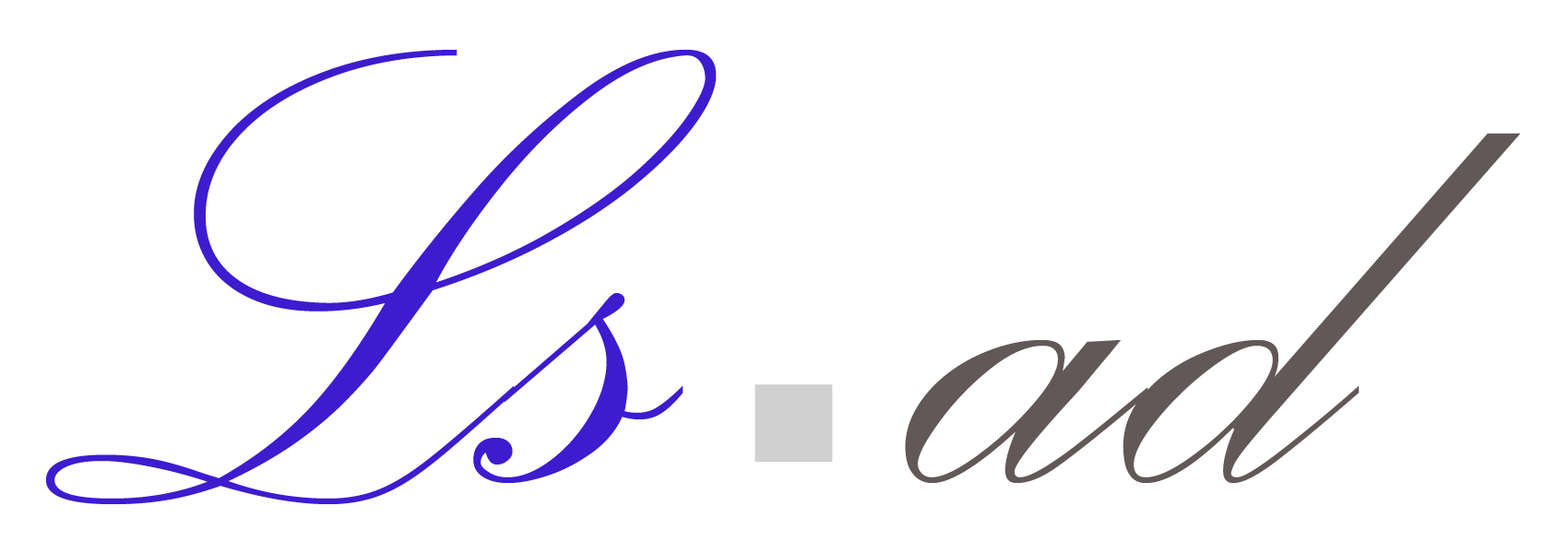
<style>
.page{position:relative;width:1568px;height:553px;background:#ffffff}
.page>*{position:absolute;margin:0}
.t1{font:812px "PalaceScriptMT";color:#3d1ccf}
.t2{font:812px "PalaceScriptMT";color:#625858}
</style>
<div class="page">
<p class="t1" style="left:46px;top:49px;width:1475px;height:456px">Ls<span class="t2">  ad</span></p>
</div>
